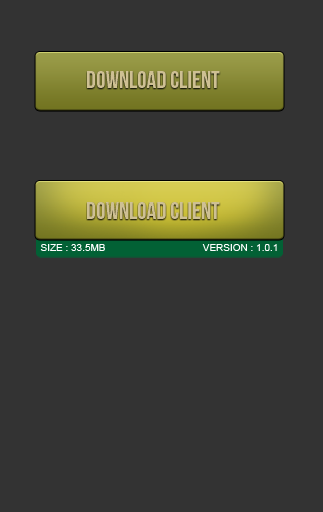
<style>
.page{position:relative;width:323px;height:512px;background:#333333}
.page>*{position:absolute;margin:0}
.t1{font:24px "BebasNeue";color:#cec093}
.t2{font:10px "ArialMT";color:#ffffff}
</style>
<div class="page">
<p class="t1" style="left:87px;top:71px;width:133px;height:17px">Download CLIENT</p>
<p class="t1" style="left:87px;top:202px;width:133px;height:17px">Download CLIENT</p>
<p class="t2" style="left:40px;top:244px;width:237px;height:7px">SIZE : 33.5MB                                   VERSION : 1.0.1</p>
</div>
